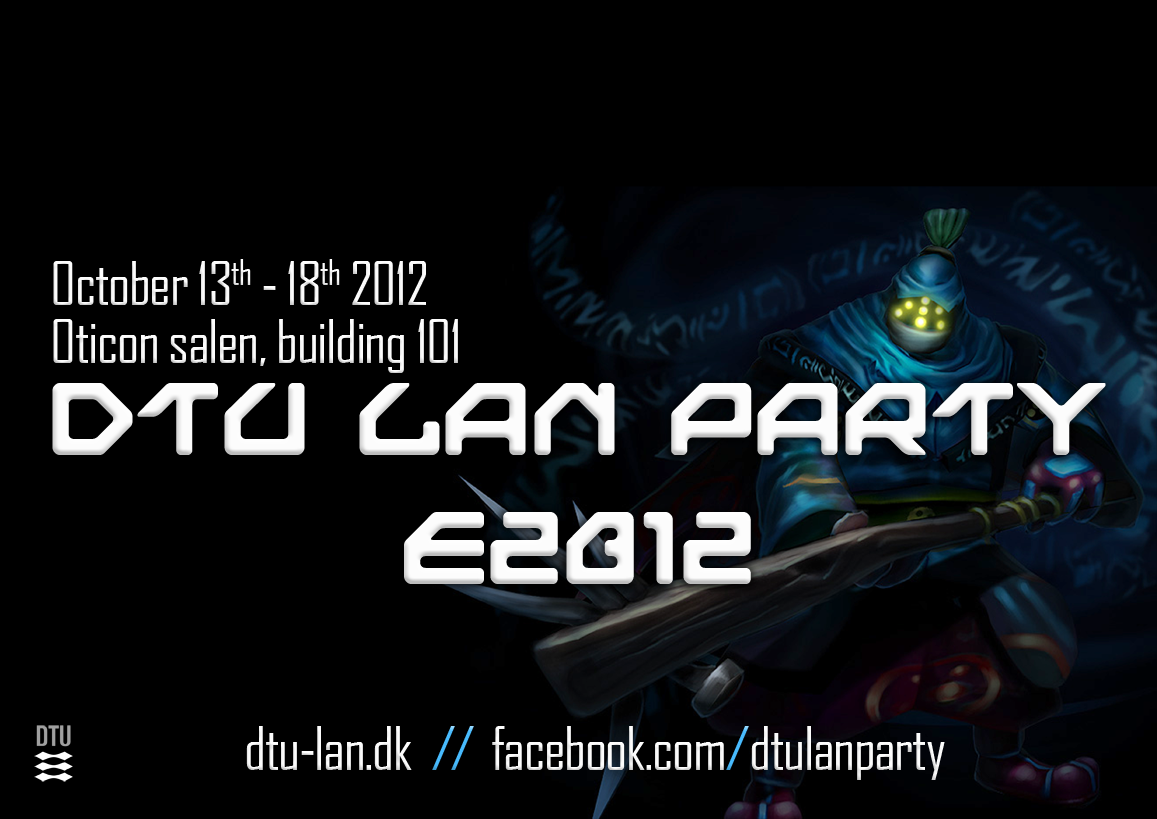
<style>
.page{position:relative;width:1157px;height:819px;background:#000000}
.page>*{position:absolute;margin:0}
.t1{font:58.4px/58.4px "AgencyFB-Reg";letter-spacing:-0.025em;color:#fcfcfc}
.t2{font:107px "NextGames";letter-spacing:-0.025em;color:#fcfcfc}
.t3{font:58.4px "AgencyFB-Reg";letter-spacing:-0.025em;color:#fcfcfc}
.t4{font:58.4px "AgencyFB-Reg";letter-spacing:-0.1em;color:#48bcff}
.t5{font:58.4px "AgencyFB-Reg";letter-spacing:-0.025em;color:#48bcff}
</style>
<div class="page">
<p class="t1" style="left:53px;top:259px;width:405px;height:114px">October 13th - 18th 2012<br>Oticon salen, building 101</p>
<p class="t2" style="left:52px;top:383px;width:1054px;height:201px;text-align:center">DTU LAN PARTY<br>E2012</p>
<p class="t3" style="left:246px;top:726px;width:699px;height:54px">dtu-lan.dk  <span class="t4">//  </span> facebook.com<span class="t5">/</span>dtulanparty</p>
</div>
